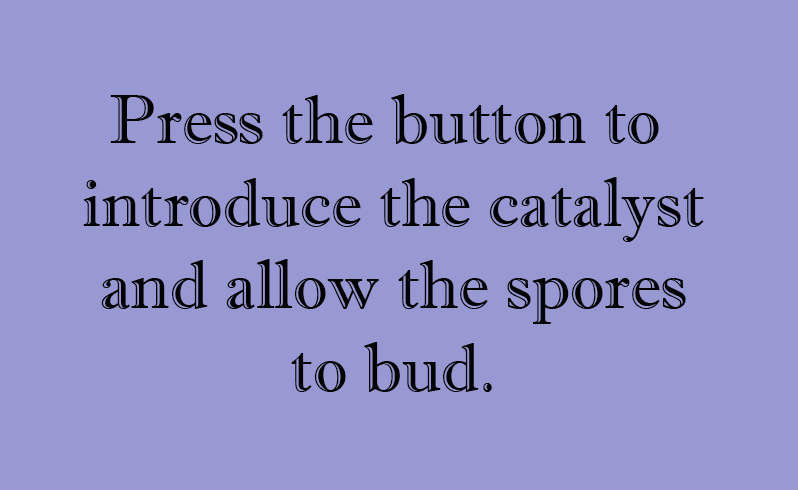
<style>
.page{position:relative;width:798px;height:490px;background:#9898d3}
.page>*{position:absolute;margin:0}
.t1{font:68.7px "ImprintMT-Shadow";color:#030303}
</style>
<div class="page">
<p class="t1" style="left:83px;top:94px;width:621px;height:298px;text-align:center">Press the button to <br>introduce the catalyst<br>and allow the spores<br>to bud.</p>
</div>
